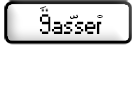
<style>
.page{position:relative;width:136px;height:100px;background:#ffffff}
.page>*{position:absolute;margin:0}
.t1{font:30.6px "AdobeArabic-Regular"}
.t2{font:26.2px "Small Fonts";color:#000000}
.t3{font:33.6px "AdobeArabic-Regular";color:#000000;scale:1.6 1}
.t4{font:27.9px "AdobeArabic-Regular";color:#000000;scale:1.6 1}
</style>
<div class="page">
<p class="t1" style="left:40px;top:6px;width:7px;height:3px">َ</p>
<p class="t2" style="left:39px;top:14px;width:63px;height:20px">9asser</p>
<p class="t3" style="left:70px;top:14px;width:8px;height:5px">ّ</p>
<p class="t4" style="left:97px;top:15px;width:6px;height:3px">ْ</p>
</div>
